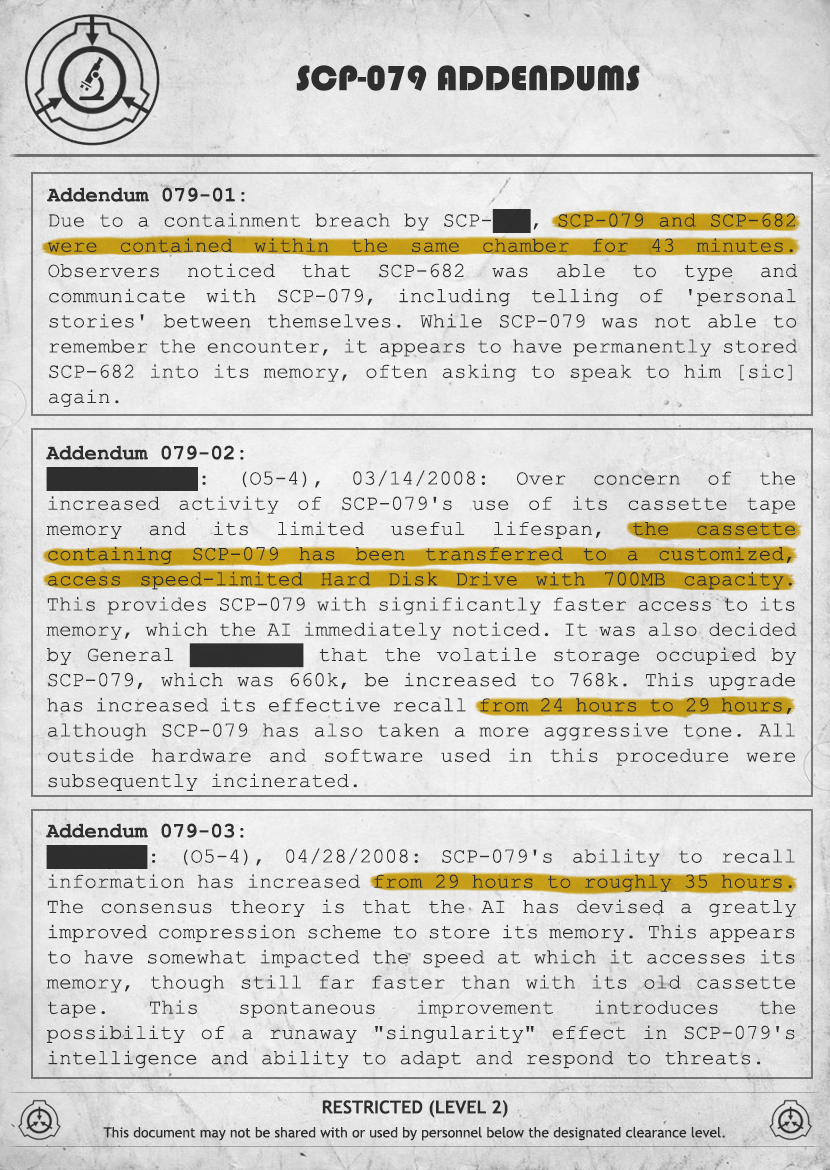
<style>
.page{position:relative;width:830px;height:1170px}
.page>*{position:absolute;margin:0}
.t1{font:36px "Bauhaus93";color:#333333;text-transform:uppercase}
.t2{font:21px "CourierNewPSMT";color:#333333}
.t3{font:21px "CourierNewPS-BoldMT";color:#333333}
.t4{font:14px/24px "TrebuchetMS";color:#333333}
.t5{font:18px/24px "TrebuchetMS-Bold";color:#333333;text-transform:uppercase}
</style>
<div class="page">
<p class="t1" style="left:296px;top:65px;width:344px;height:26px">SCP-079 Addendums</p>
<p class="t2" style="left:47px;top:187px;width:751px;height:220px;text-align:justify"><span class="t3">Addendum 079-01:<br></span>Due to a containment breach by SCP-███, SCP-079 and SCP-682 were contained within the same chamber for 43 minutes. Observers noticed that SCP-682 was able to type and communicate with SCP-079, including telling of 'personal stories' between themselves. While SCP-079 was not able to remember the encounter, it appears to have permanently stored SCP-682 into its memory, often asking to speak to him [sic] again.</p>
<p class="t2" style="left:46px;top:445px;width:751px;height:624px;text-align:justify"><span class="t3">Addendum 079-02: <br></span>████████████: (O5-4), 03/14/2008: Over concern of the increased activity of SCP-079's use of its cassette tape memory and its limited useful lifespan, the cassette containing SCP-079 has been transferred to a customized, access speed-limited Hard Disk Drive with 700MB capacity. This provides SCP-079 with significantly faster access to its memory, which the AI immediately noticed. It was also decided by General █████████ that the volatile storage occupied by SCP-079, which was 660k, be increased to 768k. This upgrade has increased its effective recall from 24 hours to 29 hours, although SCP-079 has also taken a more aggressive tone. All outside hardware and software used in this procedure were subsequently incinerated.<br><br><span class="t3">Addendum 079-03:<br></span>████████: (O5-4), 04/28/2008: SCP-079's ability to recall information has increased from 29 hours to roughly 35 hours. The consensus theory is that the AI has devised a greatly improved compression scheme to store its memory. This appears to have somewhat impacted the speed at which it accesses its memory, though still far faster than with its old cassette tape. This spontaneous improvement introduces the possibility of a runaway "singularity" effect in SCP-079's intelligence and ability to adapt and respond to threats.</p>
<p class="t4" style="left:103px;top:1100px;width:622px;height:41px;text-align:center"><span class="t5">Restricted (LEVEL 2)<br></span>This document may not be shared with or used by personnel below the designated clearance level.</p>
</div>
